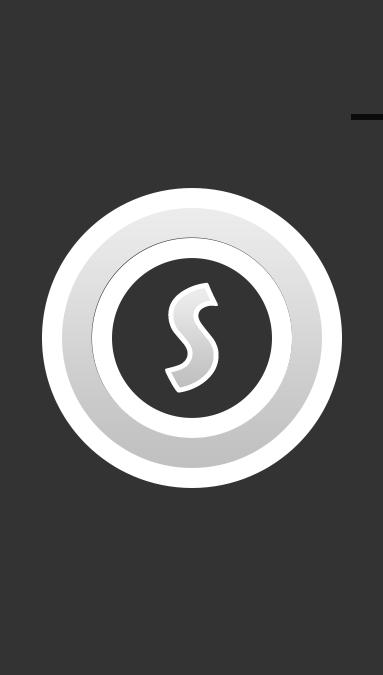
<style>
.page{position:relative;width:383px;height:675px;background:#333333}
.page>*{position:absolute;margin:0}
.t1{font:150px "BerlinSansFBDemi-Bold";letter-spacing:0.2em}
</style>
<div class="page">
<p class="t1" style="left:165px;top:282px;width:54px;height:111px">S</p>
</div>
